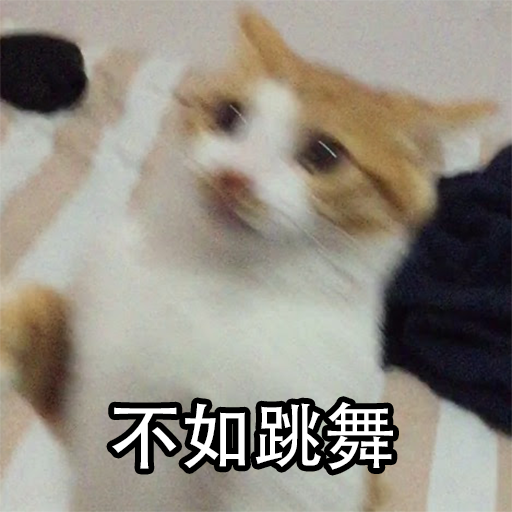
<style>
.page{position:relative;width:512px;height:512px}
.page>*{position:absolute;margin:0}
.t1{font:72px "AdobeHeitiStd-Regular";color:#ffffff}
</style>
<div class="page">
<p class="t1" style="left:112px;top:402px;width:281px;height:68px">不如跳舞</p>
</div>
